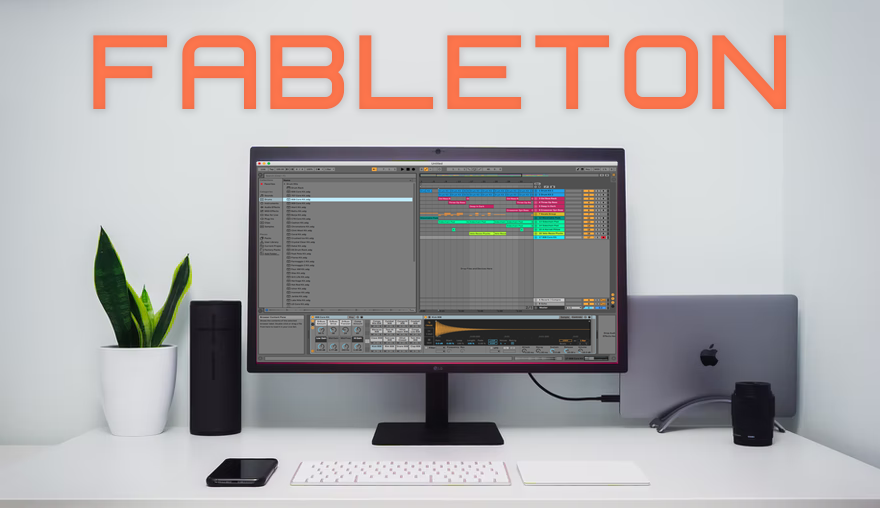
<style>
.page{position:relative;width:880px;height:508px}
.page>*{position:absolute;margin:0}
.t1{font:110.5px "Trivial-Regular";color:#ff764d}
</style>
<div class="page">
<p class="t1" style="left:93px;top:35px;width:694px;height:74px">FABLETON</p>
</div>
